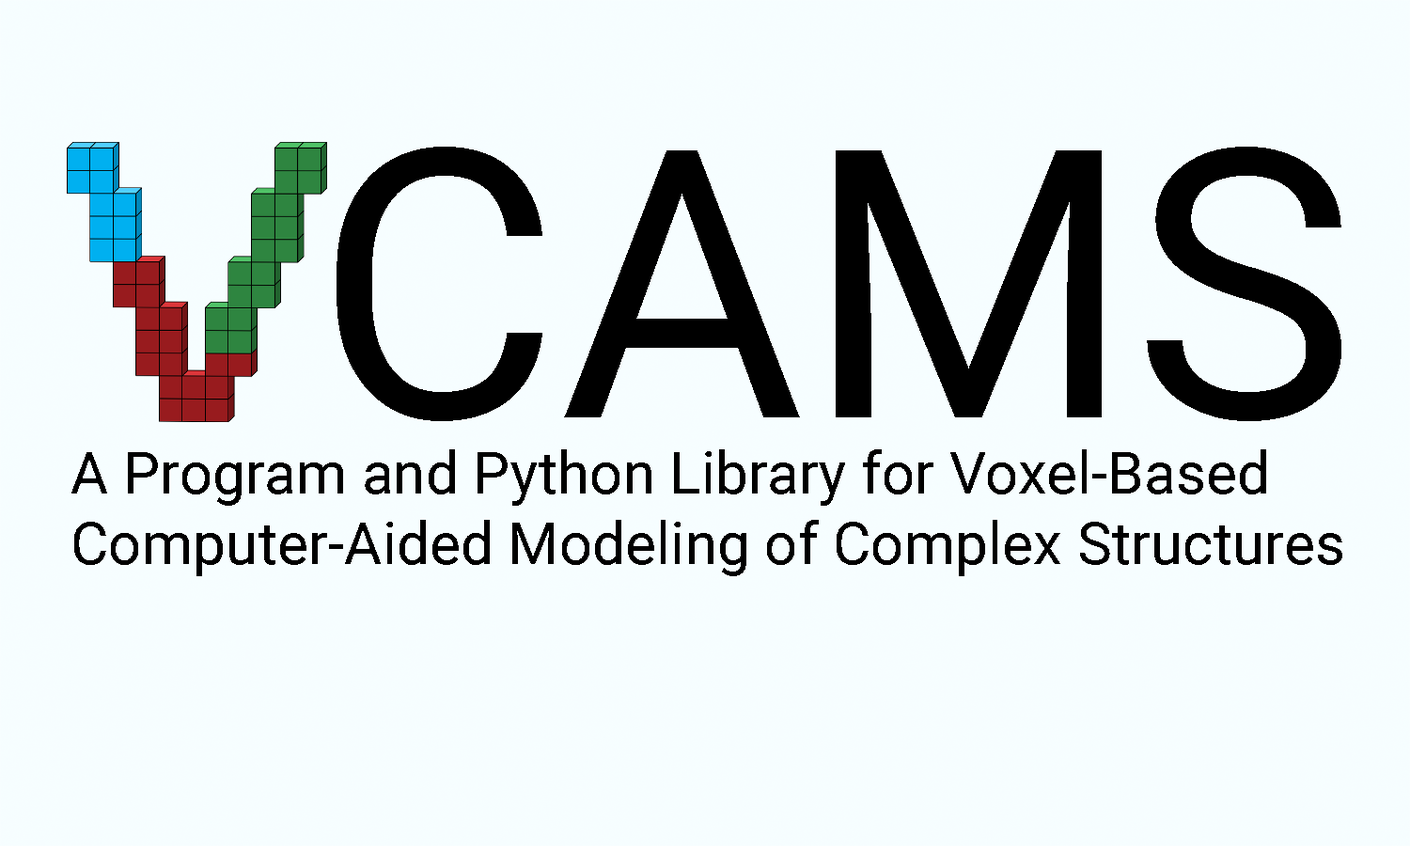
<style>
.page{position:relative;width:1410px;height:846px;background:#f6fdff}
.page>*{position:absolute;margin:0}
.t1{font:375.8px "Roboto-Regular";color:#000000}
.t2{font:58.5px "Roboto-Regular";color:#000000}
</style>
<div class="page">
<p class="t1" style="left:336px;top:147px;width:1005px;height:274px">CAMS</p>
<p class="t2" style="left:71px;top:449px;width:1271px;height:127px;text-align:right">A Program and Python Library for Voxel-Based<br> Computer-Aided Modeling of Complex Structures</p>
</div>
